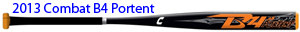
<style>
.page{position:relative;width:300px;height:32px;background:#ffffff}
.page>*{position:absolute;margin:0}
.t1{font:14px "MyriadPro-Regular";color:#0000ff}
</style>
<div class="page">
<p class="t1" style="left:12px;top:3px;width:143px;height:10px">2013 Combat B4 Portent</p>
</div>
